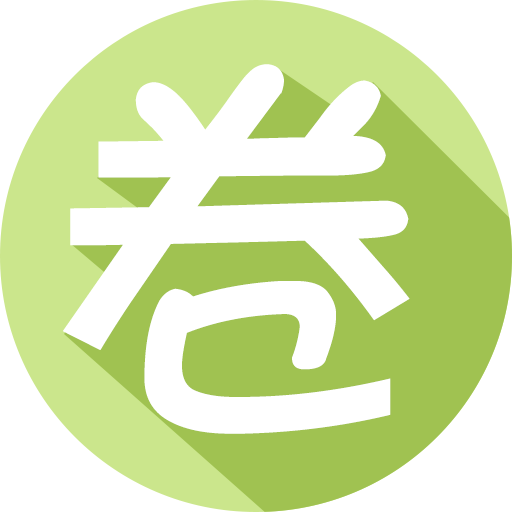
<style>
.page{position:relative;width:512px;height:512px;background:#ffffff}
.page>*{position:absolute;margin:0}
.t1{font:399.6px "kitty-";color:#ffffff}
</style>
<div class="page">
<p class="t1" style="left:63px;top:64px;width:347px;height:370px">卷</p>
</div>
